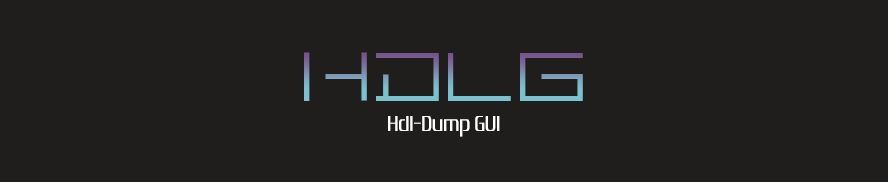
<style>
.page{position:relative;width:888px;height:182px;background:#201e1c}
.page>*{position:absolute;margin:0}
.t1{font:86.7px "MINIMALHARD"}
.t2{font:22.7px "EmotionEngine";color:#ffffff}
</style>
<div class="page">
<p class="t1" style="left:304px;top:52px;width:279px;height:49px">HDLG</p>
<p class="t2" style="left:388px;top:116px;width:112px;height:21px">Hdl-Dump GUI</p>
</div>
